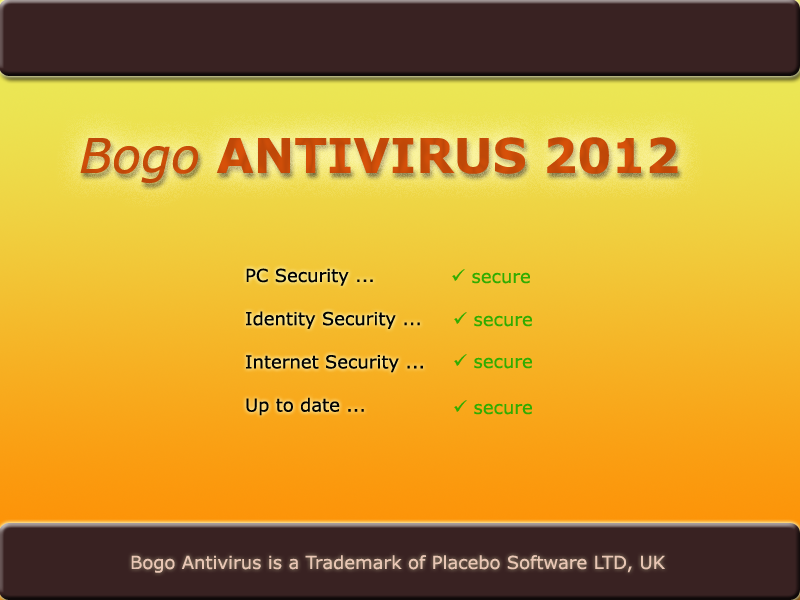
<style>
.page{position:relative;width:800px;height:600px;background:#392222}
.page>*{position:absolute;margin:0}
.t1{font:48px "Verdana-Bold";color:#da5209}
.t2{font:48px "Verdana-Italic";color:#da5209}
.t3{font:18px "Verdana";color:#020202}
.t4{font:18px "Verdana";color:#31ac00}
.t5{font:18px "Wingdings-Regular";color:#31ac00}
.t6{font:18px "Verdana";color:#e8c6b4}
</style>
<div class="page">
<p class="t1" style="left:80px;top:137px;width:598px;height:46px"><span class="t2">Bogo</span> ANTIVIRUS 2012</p>
<p class="t3" style="left:246px;top:268px;width:177px;height:148px">PC Security ... <br><br>Identity Security ...<br><br>Internet Security ...<br><br>Up to date ...</p>
<p class="t4" style="left:452px;top:269px;width:78px;height:15px"><span class="t5">ü</span> secure</p>
<p class="t4" style="left:454px;top:312px;width:78px;height:15px"><span class="t5">ü</span> secure</p>
<p class="t4" style="left:454px;top:354px;width:78px;height:15px"><span class="t5">ü</span> secure</p>
<p class="t4" style="left:454px;top:400px;width:78px;height:15px"><span class="t5">ü</span> secure</p>
<p class="t6" style="left:131px;top:555px;width:534px;height:18px">Bogo Antivirus is a Trademark of Placebo Software LTD, UK</p>
</div>
